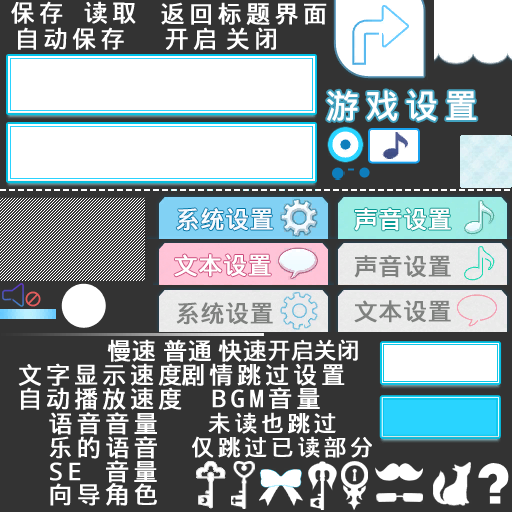
<style>
.page{position:relative;width:512px;height:512px;background:#333333}
.page>*{position:absolute;margin:0}
.t1{font:24px "WenQuanYiMicroHeiMono";letter-spacing:0.16em;color:#ffffff;font-weight:bold}
.t2{font:33.3px "WenQuanYiMicroHeiMono";letter-spacing:0.16em;color:#ffffff;font-weight:bold}
.t3{font:24px "WenQuanYiMicroHeiMono";color:#f7fbff;font-weight:bold}
.t4{font:24px "WenQuanYiMicroHeiMono";color:#ffffff;font-weight:bold}
.t5{font:24px "WenQuanYiMicroHeiMono";color:#7f817f;font-weight:bold}
.t6{font:22.7px "WenQuanYiMicroHeiMono";color:#ffffff;font-weight:bold}
.t7{font:24px "WenQuanYiMicroHeiMono";letter-spacing:0.14em;color:#ffffff;font-weight:bold}
.t8{font:22.7px "WenQuanYiMicroHeiMono";letter-spacing:0.14em;color:#ffffff;font-weight:bold}
</style>
<div class="page">
<p class="t1" style="left:11px;top:1px;width:52px;height:23px">保存</p>
<p class="t1" style="left:84px;top:1px;width:52px;height:23px">读取</p>
<p class="t1" style="left:161px;top:2px;width:166px;height:23px">返回标题界面</p>
<p class="t1" style="left:18px;top:27px;width:106px;height:23px">自动保存</p>
<p class="t1" style="left:165px;top:27px;width:50px;height:23px">开启</p>
<p class="t1" style="left:226px;top:27px;width:50px;height:23px">关闭</p>
<p class="t2" style="left:327px;top:90px;width:150px;height:31px">游戏设置</p>
<p class="t3" style="left:176px;top:208px;width:97px;height:23px">系统设置</p>
<p class="t4" style="left:354px;top:208px;width:97px;height:23px">声音设置</p>
<p class="t4" style="left:174px;top:254px;width:97px;height:23px">文本设置</p>
<p class="t5" style="left:354px;top:255px;width:97px;height:23px">声音设置</p>
<p class="t5" style="left:176px;top:302px;width:97px;height:23px">系统设置</p>
<p class="t5" style="left:354px;top:300px;width:97px;height:23px">文本设置</p>
<p class="t4" style="left:107px;top:339px;width:48px;height:23px">慢速</p>
<p class="t4" style="left:164px;top:339px;width:47px;height:23px">普通</p>
<p class="t4" style="left:218px;top:339px;width:48px;height:23px">快速</p>
<p class="t6" style="left:268px;top:339px;width:44px;height:22px">开启</p>
<p class="t6" style="left:314px;top:339px;width:44px;height:22px">关闭</p>
<p class="t7" style="left:18px;top:363px;width:164px;height:23px">文字显示速度</p>
<p class="t7" style="left:182px;top:363px;width:163px;height:23px">剧情跳过设置</p>
<p class="t7" style="left:21px;top:387px;width:161px;height:23px">自动播放速度</p>
<p class="t1" style="left:49px;top:412px;width:108px;height:23px">语音音量</p>
<p class="t8" style="left:208px;top:412px;width:128px;height:22px">未读也跳过</p>
<p class="t1" style="left:49px;top:436px;width:108px;height:23px">乐的语音</p>
<p class="t8" style="left:192px;top:436px;width:180px;height:22px">仅跳过已读部分</p>
<p class="t1" style="left:50px;top:460px;width:107px;height:23px">SE 音量</p>
<p class="t1" style="left:50px;top:483px;width:107px;height:23px">向导角色</p>
</div>
